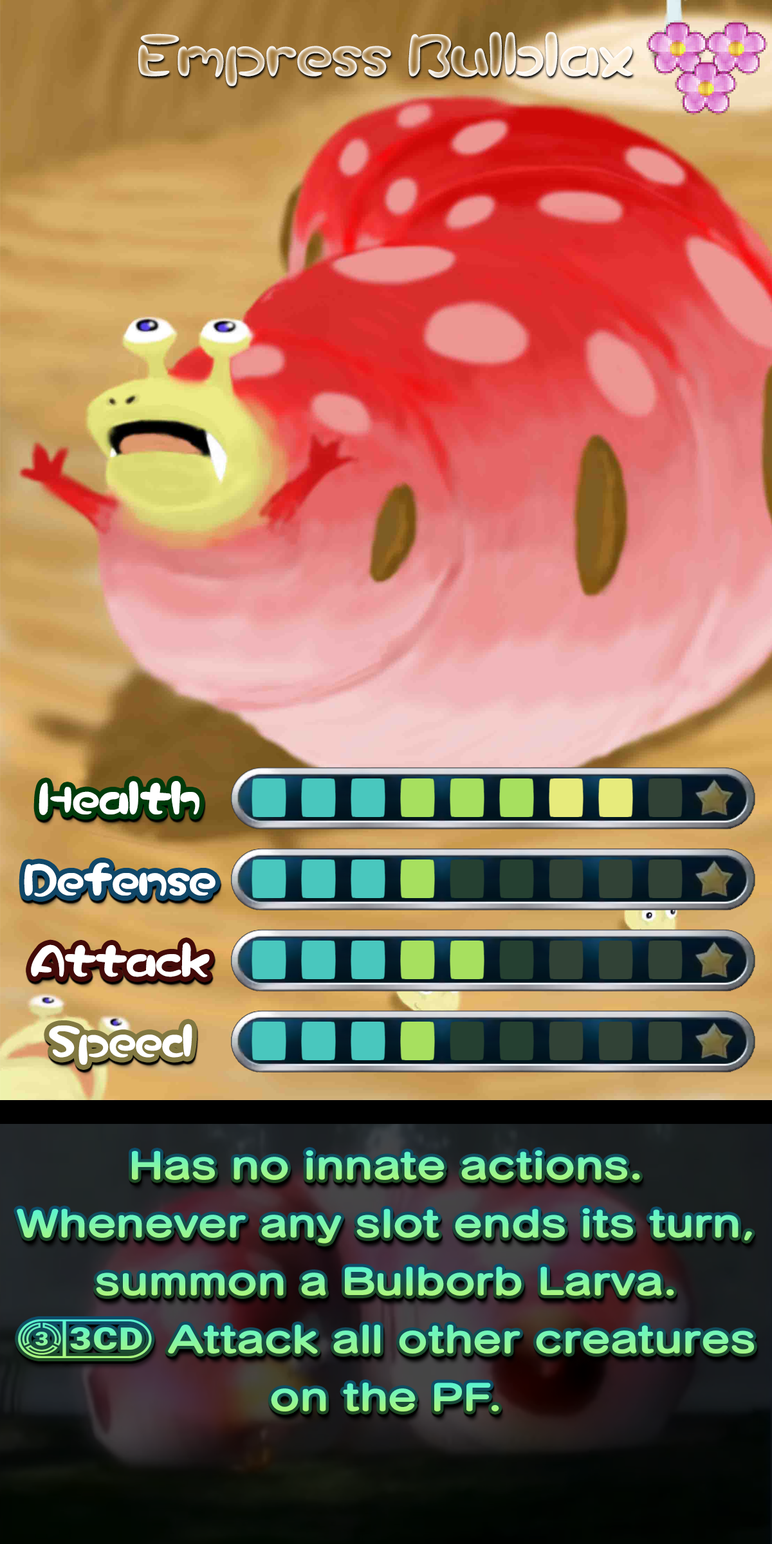
<style>
.page{position:relative;width:772px;height:1544px}
.page>*{position:absolute;margin:0}
.t1{font:103px "Pikmin"}
.t2{font:77.2px "Pikmin";color:#ffffff}
.t3{font:61.8px "SeuratPro-B";scale:1.2 1}
.t4{font:70.6px "stoogedings-Regular";scale:1.2 1}
</style>
<div class="page">
<p class="t1" style="left:138px;top:32px;width:495px;height:54px">Empress Bulblax</p>
<p class="t2" style="left:39px;top:781px;width:160px;height:34px">Health</p>
<p class="t2" style="left:24px;top:863px;width:192px;height:34px">Defense</p>
<p class="t2" style="left:31px;top:943px;width:179px;height:34px">Attack</p>
<p class="t2" style="left:49px;top:1024px;width:143px;height:41px">Speed</p>
<p class="t3" style="left:132px;top:1151px;width:508px;height:29px">Has no innate actions.</p>
<p class="t3" style="left:17px;top:1208px;width:735px;height:36px">Whenever any slot ends its turn,</p>
<p class="t3" style="left:96px;top:1267px;width:578px;height:29px">summon a Bulborb Larva.</p>
<p class="t3" style="left:18px;top:1319px;width:737px;height:39px"><span class="t4">(3CD)</span> Attack all other creatures</p>
<p class="t3" style="left:271px;top:1383px;width:228px;height:29px">on the PF.</p>
</div>
